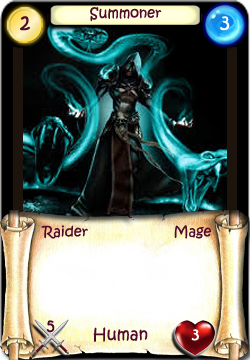
<style>
.page{position:relative;width:250px;height:360px}
.page>*{position:absolute;margin:0}
.t1{font:20px "KristenITC-Regular";color:#51092d}
.t2{font:14px "KristenITC-Regular";color:#51092d}
.t3{font:20px "KristenITC-Regular";color:#ffffff}
.t4{font:16px "KristenITC-Regular";color:#51092d}
.t5{font:16px "KristenITC-Regular";color:#fefefe}
</style>
<div class="page">
<p class="t1" style="left:20px;top:16px;width:10px;height:15px">2</p>
<p class="t2" style="left:90px;top:7px;width:72px;height:15px">Summoner</p>
<p class="t3" style="left:220px;top:16px;width:10px;height:15px">3</p>
<p class="t2" style="left:41px;top:225px;width:47px;height:14px">Raider</p>
<p class="t2" style="left:174px;top:225px;width:38px;height:14px">Mage</p>
<p class="t4" style="left:46px;top:320px;width:9px;height:13px">5</p>
<p class="t4" style="left:93px;top:327px;width:55px;height:15px">Human</p>
<p class="t5" style="left:191px;top:329px;width:8px;height:12px">3</p>
</div>
